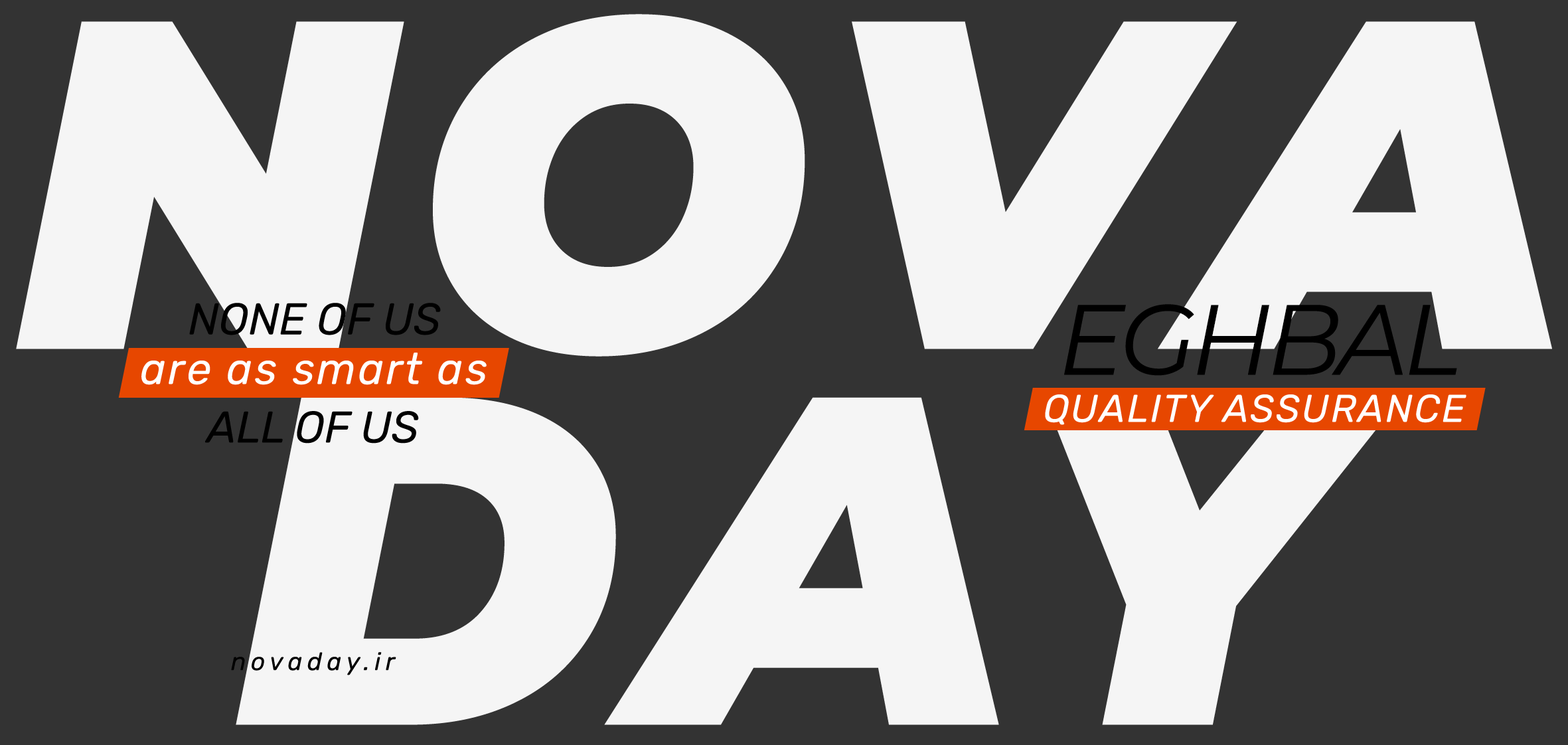
<style>
.page{position:relative;width:1568px;height:745px;background:#333333}
.page>*{position:absolute;margin:0}
.t1{font:467.1px/375.8px "Montserrat-BlackItalic";letter-spacing:0.05em;color:#f5f5f5}
.t2{font:44.3px "Rubik-Italic";color:#000000}
.t3{font:99.6px "Montserrat-Italic";letter-spacing:-0.05em;color:#000000}
.t4{font:44.3px "Rubik-Italic";letter-spacing:0.05em;color:#ffffff}
.t5{font:38.7px "Rubik-Italic";letter-spacing:0.05em;color:#ffffff}
.t6{font:24.9px "Rubik-Italic";letter-spacing:0.2em;color:#000000}
</style>
<div class="page">
<p class="t1" style="left:16px;top:14px;width:1536px;height:711px;text-align:center">NOVA<br>DAY</p>
<p class="t2" style="left:189px;top:303px;width:252px;height:32px">NONE OF US</p>
<p class="t3" style="left:1064px;top:304px;width:393px;height:72px">EGHBAL</p>
<p class="t4" style="left:141px;top:353px;width:346px;height:32px">are as smart as</p>
<p class="t5" style="left:1045px;top:394px;width:421px;height:31px">QUALITY ASSURANCE</p>
<p class="t2" style="left:205px;top:411px;width:214px;height:32px">ALL OF US</p>
<p class="t6" style="left:231px;top:652px;width:165px;height:23px">novaday.ir</p>
</div>
